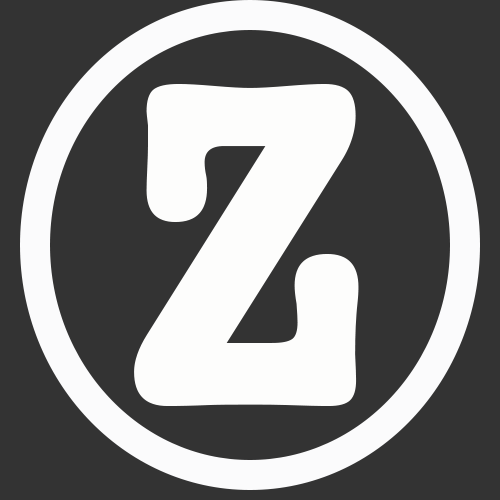
<style>
.page{position:relative;width:500px;height:500px;background:#333333}
.page>*{position:absolute;margin:0}
.t1{font:480px "AmericanTypewriter-CondensedBold";color:#fdfdfc}
</style>
<div class="page">
<p class="t1" style="left:134px;top:84px;width:225px;height:322px">Z</p>
</div>
